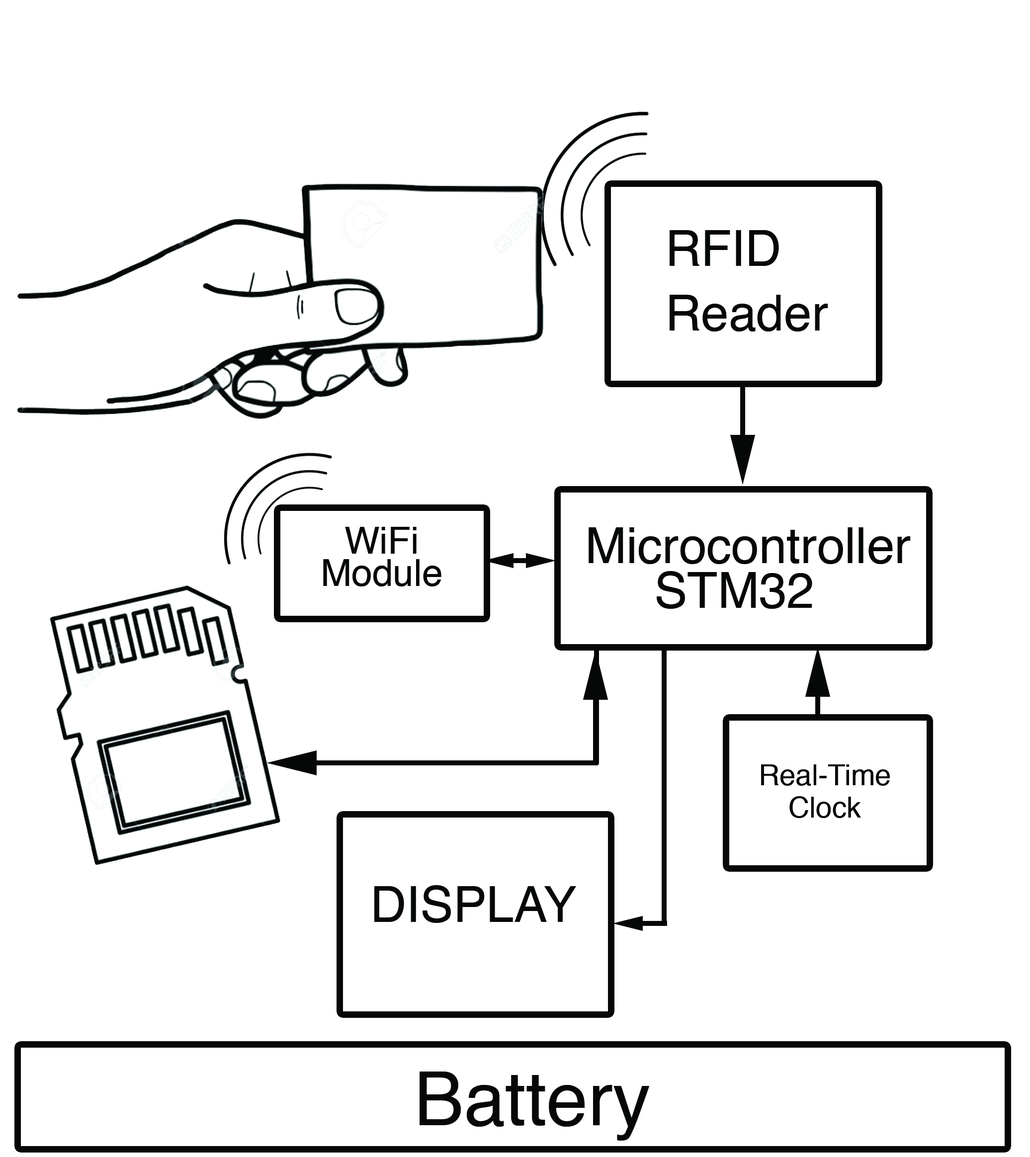
<style>
.page{position:relative;width:1030px;height:1157px;background:#ffffff}
.page>*{position:absolute;margin:0}
.t1{font:49.7px/12.4px "Helvetica";color:#060808}
.t2{font:37.3px/12.4px "Helvetica";color:#060808}
.t3{font:29px/12.4px "Helvetica";color:#060808}
.t4{font:49.7px "Helvetica";color:#060808}
.t5{font:74.6px "Helvetica";color:#060808}
</style>
<div class="page">
<p class="t1" style="left:670px;top:230px;width:158px;height:102px">RFID<br><br>Reader</p>
<p class="t2" style="left:323px;top:527px;width:119px;height:60px;text-align:center">WiFi<br>Module</p>
<p class="t1" style="left:589px;top:528px;width:322px;height:81px">Microcontroller<br><br>     STM32</p>
<p class="t3" style="left:761px;top:765px;width:129px;height:53px;text-align:center">Real-Time<br>Clock</p>
<p class="t4" style="left:374px;top:886px;width:202px;height:37px">DISPLAY</p>
<p class="t5" style="left:420px;top:1072px;width:230px;height:69px">Battery</p>
</div>
